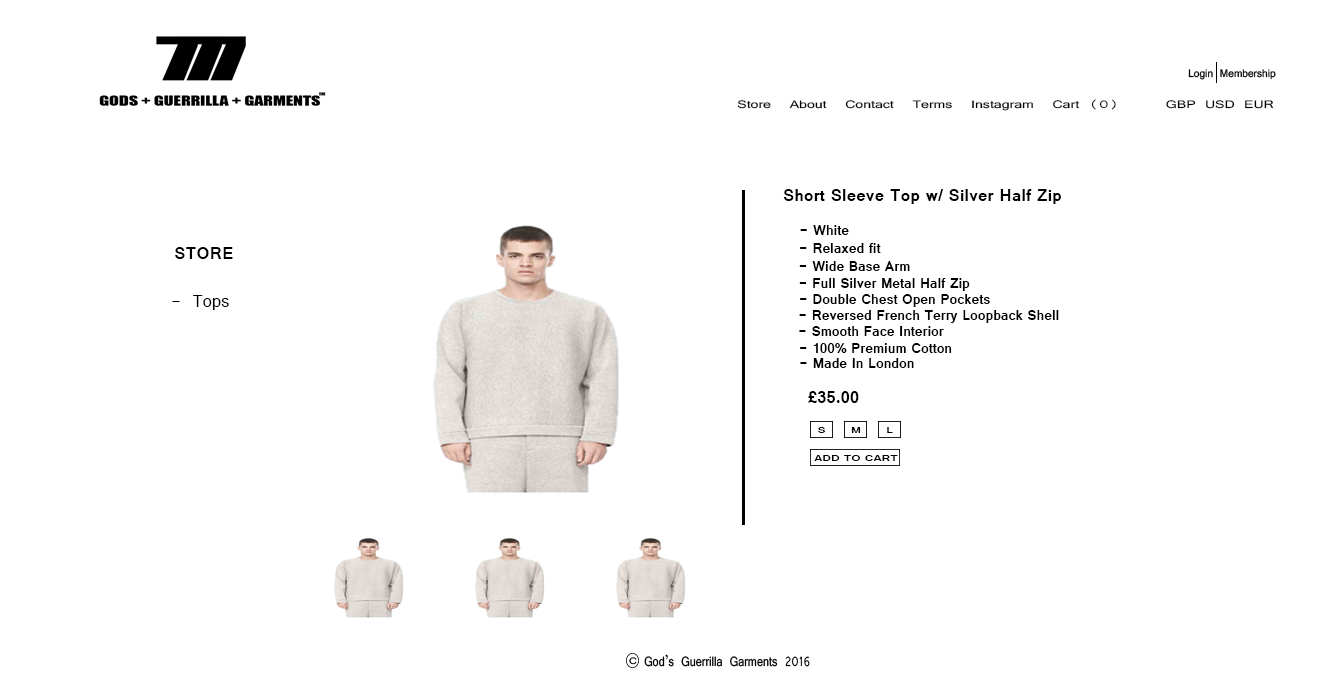
<style>
.page{position:relative;width:1332px;height:683px;background:#ffffff}
.page>*{position:absolute;margin:0}
.t1{font:11.7px "Vrinda";color:#000000;scale:1.35 1}
.t2{font:18.5px "Vrinda-Bold";color:#000000}
.t3{font:14.8px "Vrinda-Bold";color:#000000}
.t4{font:18.5px "Vrinda";color:#000000}
.t5{font:9.9px "Vrinda-Bold";color:#000000;scale:1.31 1}
</style>
<div class="page">
<p class="t1" style="left:737px;top:99px;width:537px;height:12px">Store  About  Contact  Terms  Instagram  Cart (0)     GBP USD EUR</p>
<p class="t2" style="left:783px;top:189px;width:278px;height:15px">Short Sleeve Top w/ Silver Half Zip</p>
<p class="t3" style="left:800px;top:225px;width:49px;height:10px"><span class="t2"><br> </span>- White</p>
<p class="t3" style="left:800px;top:243px;width:81px;height:10px"><span class="t2"><br> </span>- Relaxed fit</p>
<p class="t2" style="left:175px;top:247px;width:58px;height:12px">STORE</p>
<p class="t3" style="left:799px;top:261px;width:111px;height:10px">- Wide Base Arm</p>
<p class="t3" style="left:799px;top:278px;width:171px;height:13px">- Full Silver Metal Half Zip</p>
<p class="t3" style="left:800px;top:294px;width:190px;height:13px">- Double Chest Open Pockets</p>
<p class="t4" style="left:172px;top:295px;width:57px;height:15px">- Tops</p>
<p class="t3" style="left:799px;top:310px;width:260px;height:13px">- Reversed French Terry Loopback Shell</p>
<p class="t3" style="left:799px;top:326px;width:145px;height:10px">- Smooth Face Interior</p>
<p class="t3" style="left:800px;top:343px;width:152px;height:10px">- 100% Premium Cotton</p>
<p class="t3" style="left:800px;top:358px;width:114px;height:10px">- Made In London</p>
<p class="t2" style="left:808px;top:391px;width:51px;height:12px">£35.00</p>
<p class="t5" style="left:818px;top:427px;width:7px;height:6px">S</p>
<p class="t5" style="left:851px;top:427px;width:10px;height:6px">M</p>
<p class="t5" style="left:887px;top:427px;width:6px;height:6px">L</p>
<p class="t5" style="left:814px;top:455px;width:84px;height:6px">ADD TO CART</p>
</div>
